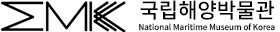
<style>
.page{position:relative;width:280px;height:32px;background:#ffffff}
.page>*{position:absolute;margin:0}
.t1{font:21px "NotoSansKR-Medium";color:#000000}
.t2{font:8px "NotoSansKR-Medium";color:#000000}
</style>
<div class="page">
<p class="t1" style="left:140px;top:0px;width:134px;height:20px">국립해양박물관</p>
<p class="t2" style="left:139px;top:23px;width:136px;height:8px">National Maritime Museum of Korea</p>
</div>
